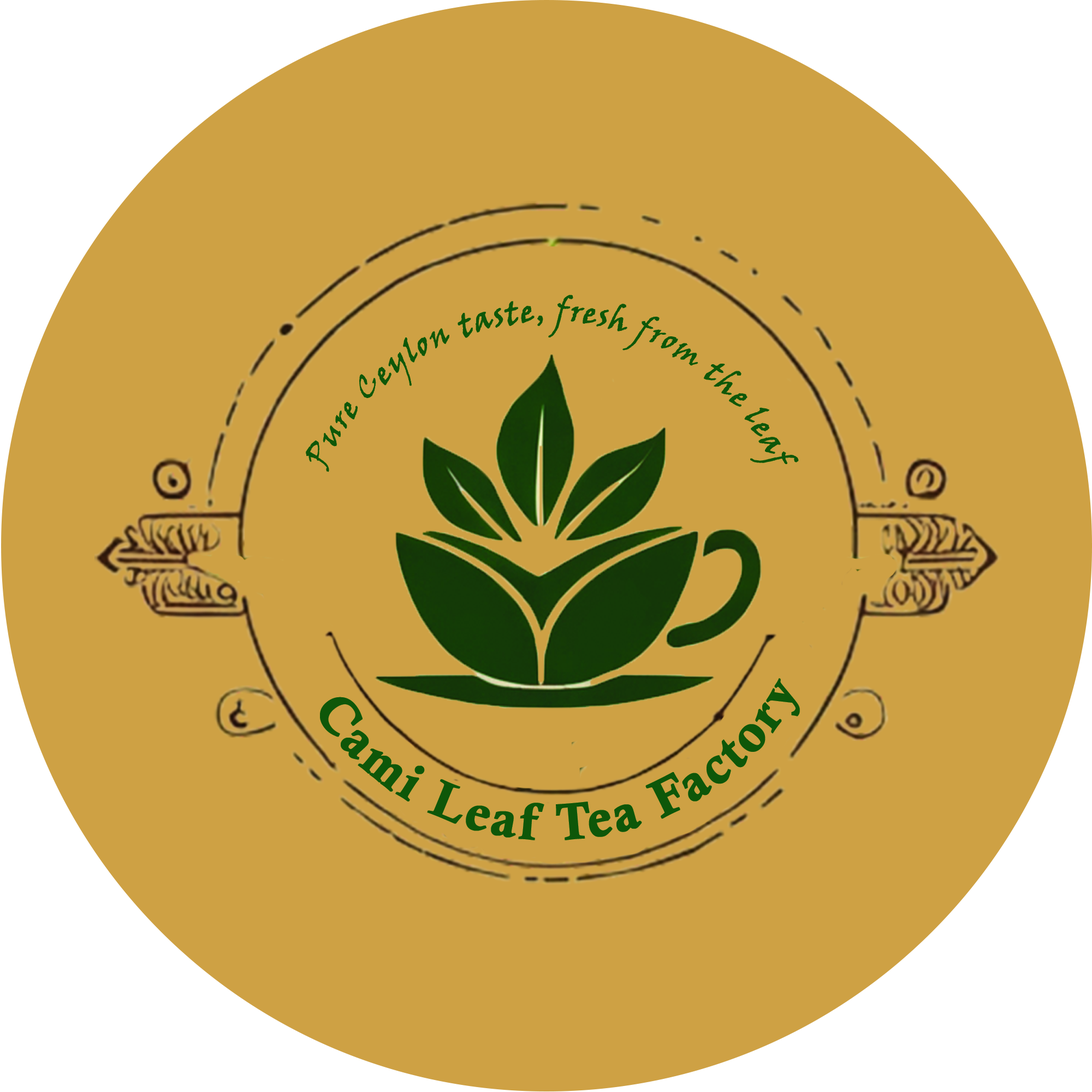
<style>
.page{position:relative;width:1092px;height:1092px;background:#cea144}
.page>*{position:absolute;margin:0}
.t1{font:31.8px/7.3px "VinerHandITC";color:#0e5709;font-weight:bold;scale:0.94 1}
.t2{font:51.5px/7.3px "CalisMTBol";letter-spacing:0.07em;color:#0e5709;font-weight:bold}
</style>
<div class="page">
<p class="t1" style="left:306px;top:295px;width:493px;height:177px;text-align:center">Pure Ceylon taste, fresh from the leaf</p>
<p class="t2" style="left:320px;top:678px;width:480px;height:162px;text-align:center">Cami Leaf Tea Factory</p>
</div>
